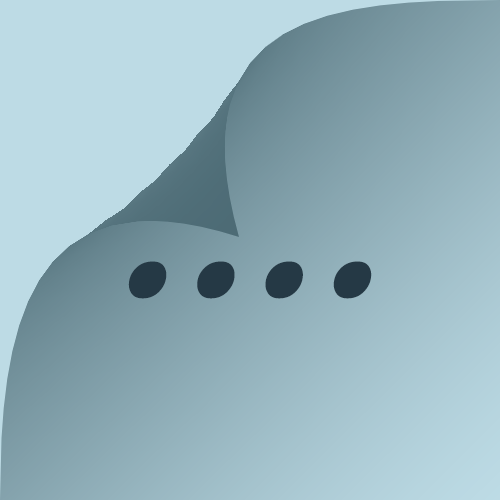
<style>
.page{position:relative;width:500px;height:500px;background:#bddbe5}
.page>*{position:absolute;margin:0}
.t1{font:271px "Candara";color:#253945;font-style:italic}
</style>
<div class="page">
<p class="t1" style="left:128px;top:261px;width:244px;height:38px">....</p>
</div>
